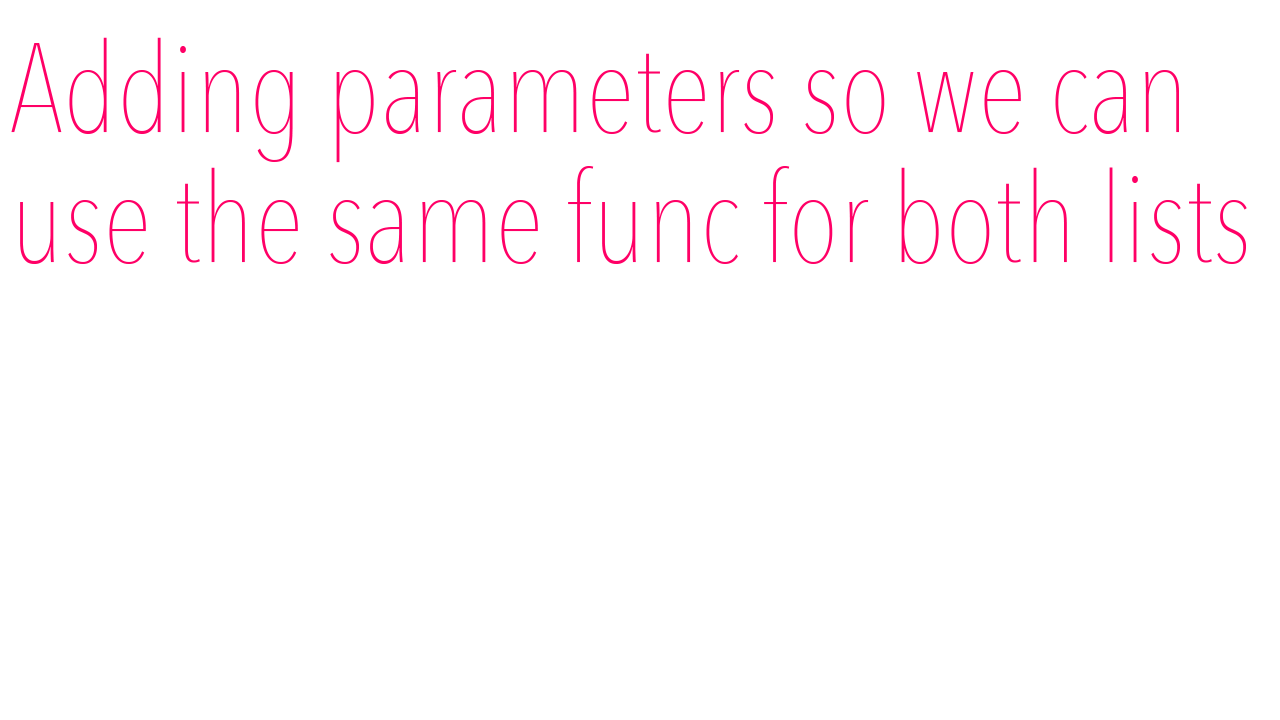
<style>
.page{position:relative;width:1280px;height:720px;background:#ffffff}
.page>*{position:absolute;margin:0}
.t1{font:125px "AvenirNextCondensed-UltraLight";color:#ff0066}
</style>
<div class="page">
<p class="t1" style="left:11px;top:37px;width:1236px;height:227px">Adding parameters so we can<br>use the same func for both lists</p>
</div>
